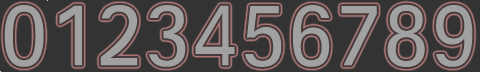
<style>
.page{position:relative;width:480px;height:72px;background:#333333}
.page>*{position:absolute;margin:0}
.t1{font:89.4px "SIL-Hei-Med-Jian";color:#a2a1a1;scale:0.97 1}
</style>
<div class="page">
<p class="t1" style="left:4px;top:5px;width:40px;height:62px">0</p>
<p class="t1" style="left:59px;top:5px;width:23px;height:61px">1</p>
<p class="t1" style="left:100px;top:5px;width:38px;height:61px">2</p>
<p class="t1" style="left:149px;top:5px;width:37px;height:62px">3</p>
<p class="t1" style="left:195px;top:5px;width:40px;height:61px">4</p>
<p class="t1" style="left:245px;top:6px;width:37px;height:61px">5</p>
<p class="t1" style="left:293px;top:5px;width:37px;height:62px">6</p>
<p class="t1" style="left:341px;top:6px;width:36px;height:60px">7</p>
<p class="t1" style="left:387px;top:4px;width:38px;height:63px">8</p>
<p class="t1" style="left:436px;top:5px;width:37px;height:62px">9</p>
</div>
